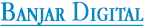
<style>
.page{position:relative;width:145px;height:26px;background:#ffffff}
.page>*{position:absolute;margin:0}
.t1{font:29.2px "AppleGaramond";color:#018cc4;font-variant:small-caps;font-weight:bold;text-decoration:underline}
</style>
<div class="page">
<p class="t1" style="left:0px;top:1px;width:144px;height:26px">Banjar Digital</p>
</div>
